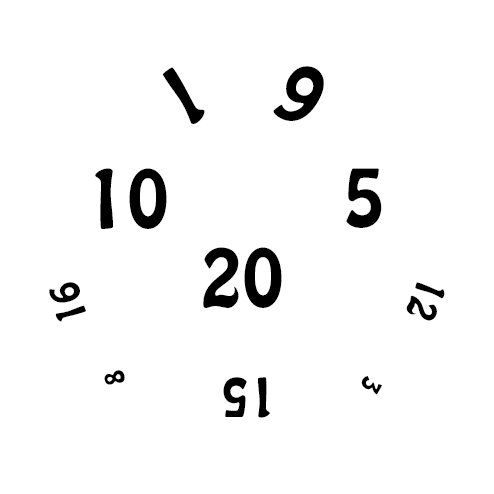
<style>
.page{position:relative;width:494px;height:494px;background:#ffffff}
.page>*{position:absolute;margin:0}
.t1{font:72px "HoboStd";color:#000000}
.t2{font:36px "HoboStd";color:#000000}
.t3{font:24px "HoboStd";color:#000000}
.t4{font:48px "HoboStd";color:#000000}
</style>
<div class="page">
<p class="t1" style="left:162px;top:67px;width:43px;height:57px;rotate:150deg">1</p>
<p class="t1" style="left:273px;top:66px;width:51px;height:55px;rotate:-150deg">6</p>
<p class="t1" style="left:95px;top:168px;width:72px;height:61px">10</p>
<p class="t1" style="left:346px;top:168px;width:36px;height:60px">5</p>
<p class="t1" style="left:203px;top:247px;width:79px;height:61px">20</p>
<p class="t2" style="left:49px;top:282px;width:37px;height:40px;rotate:-106deg">16</p>
<p class="t2" style="left:406px;top:282px;width:39px;height:39px;rotate:111deg">12</p>
<p class="t3" style="left:104px;top:370px;width:21px;height:15px;rotate:-105deg">8</p>
<p class="t4" style="left:223px;top:377px;width:47px;height:41px;rotate:180deg">15</p>
<p class="t3" style="left:361px;top:376px;width:21px;height:19px;rotate:120deg">3</p>
</div>
